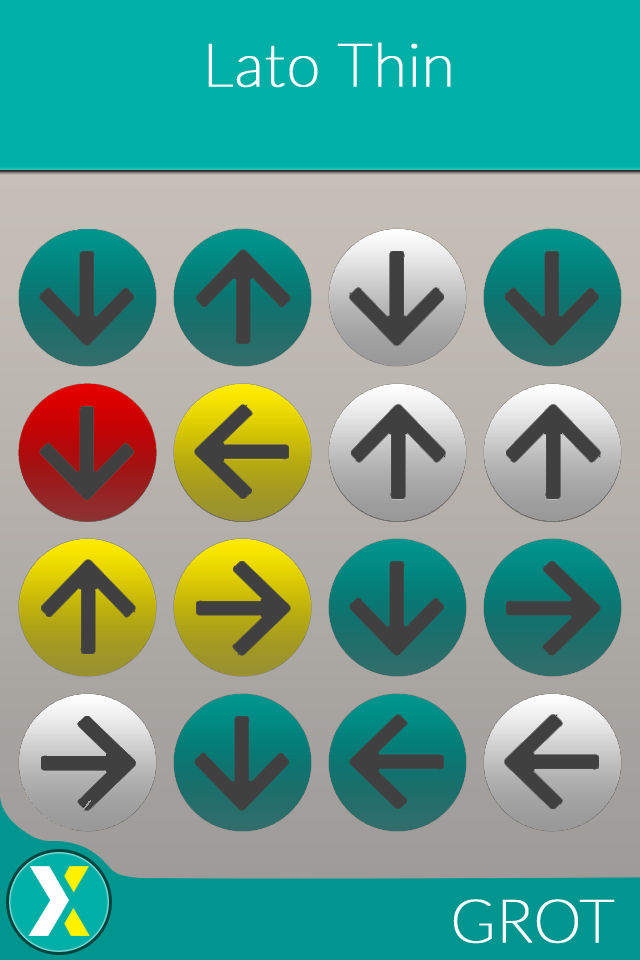
<style>
.page{position:relative;width:640px;height:960px}
.page>*{position:absolute;margin:0}
.t1{font:60px "Lato-Thin";color:#ffffff;font-weight:bold}
</style>
<div class="page">
<p class="t1" style="left:208px;top:42px;width:243px;height:46px">Lato Thin</p>
<p class="t1" style="left:453px;top:899px;width:162px;height:45px">GROT</p>
</div>
